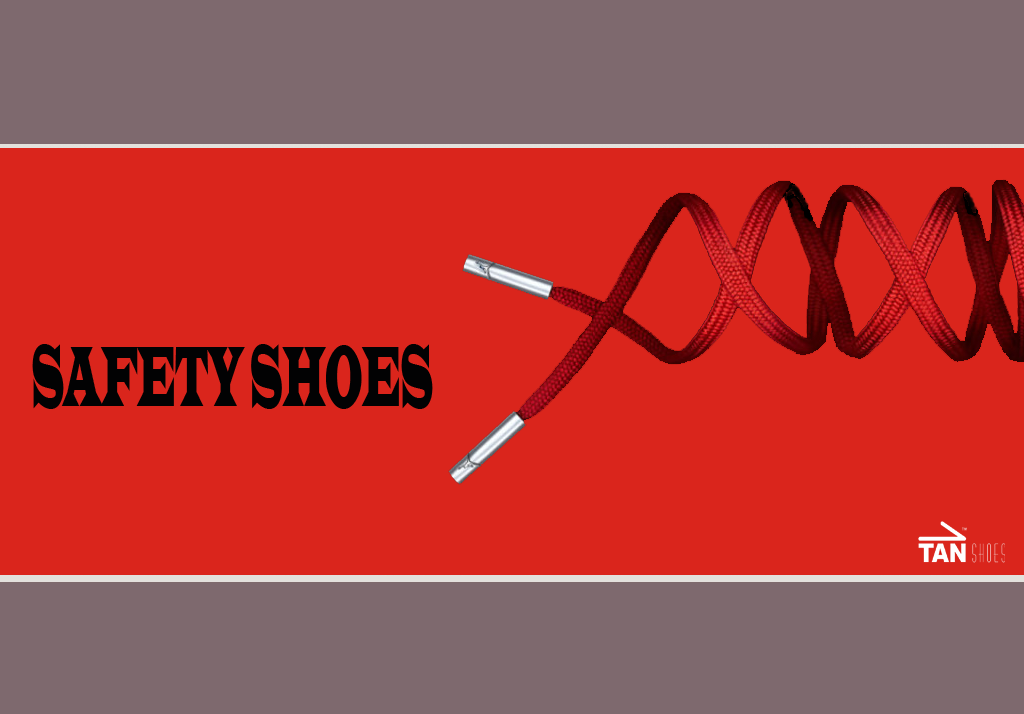
<style>
.page{position:relative;width:1024px;height:714px;background:#da251c}
.page>*{position:absolute;margin:0}
.t1{font:89.3px "LatinWide";letter-spacing:-0.025em;color:#020203;scale:0.31 1}
</style>
<div class="page">
<p class="t1" style="left:32px;top:344px;width:401px;height:65px">SAFETY SHOES</p>
</div>
